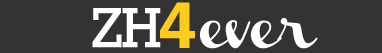
<style>
.page{position:relative;width:382px;height:53px;background:#333333}
.page>*{position:absolute;margin:0}
.t1{font:60.4px "CharcoalCY";letter-spacing:-0.04em;color:#ffcc1c}
.t2{font:57.3px "Rockwell";letter-spacing:-0.04em;color:#ffffff}
.t3{font:43.8px "Channel";letter-spacing:-0.04em;color:#ffffff}
</style>
<div class="page">
<p class="t1" style="left:160px;top:2px;width:35px;height:46px">4</p>
<p class="t2" style="left:92px;top:8px;width:69px;height:40px">ZH</p>
<p class="t3" style="left:200px;top:17px;width:118px;height:32px">ever</p>
</div>
